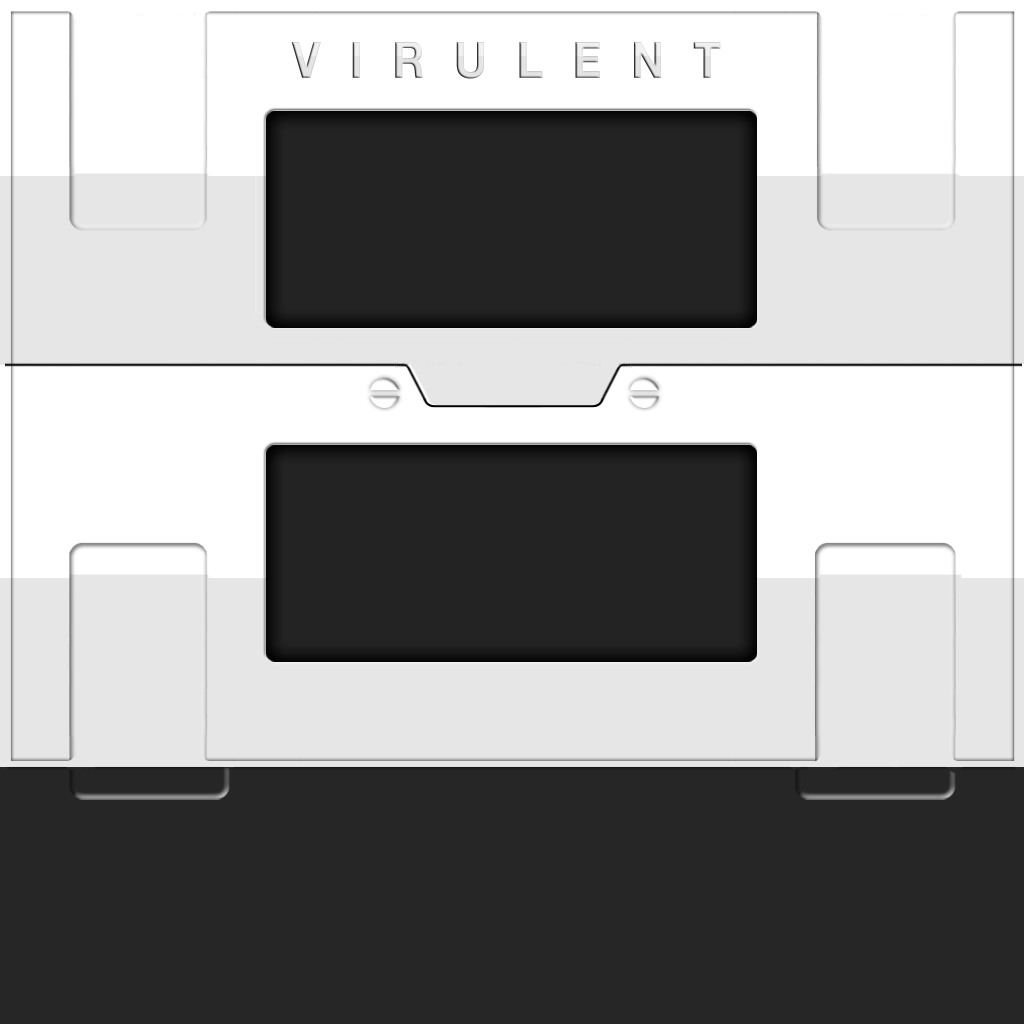
<style>
.page{position:relative;width:1024px;height:1024px;background:#ffffff}
.page>*{position:absolute;margin:0}
.t1{font:50px "HelveticaNeue-Bold";letter-spacing:0.65em;color:#f0f0f0;scale:0.9 1}
</style>
<div class="page">
<p class="t1" style="left:291px;top:42px;width:430px;height:37px">VIRULENT</p>
</div>
